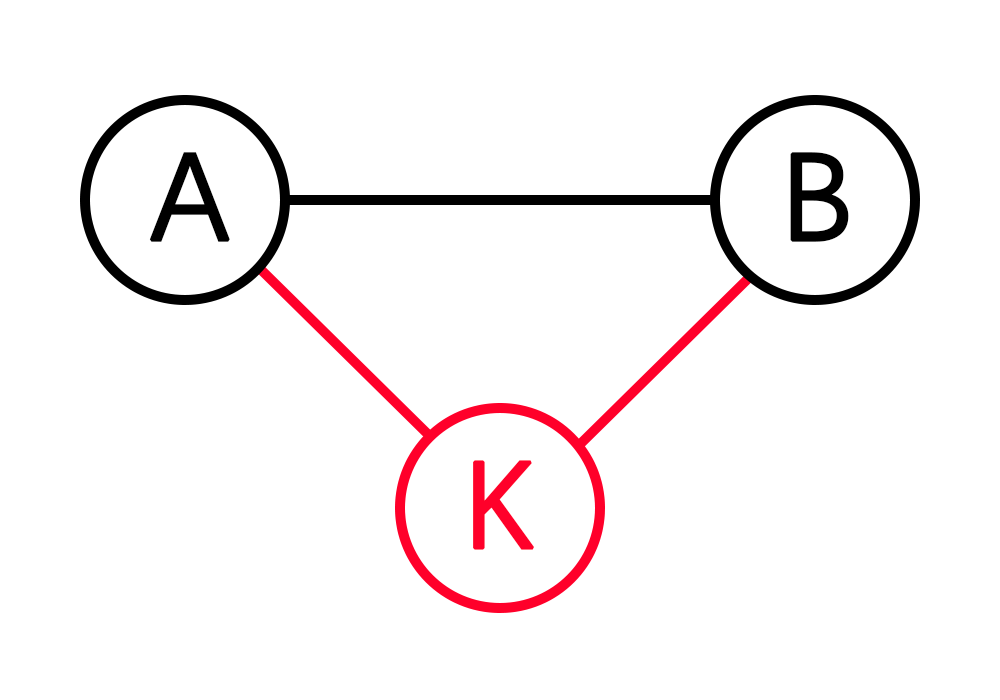
<style>
.page{position:relative;width:1000px;height:700px;background:#ffffff}
.page>*{position:absolute;margin:0}
.t1{font:125px "DengXian";color:#000000;font-weight:bold}
.t2{font:125px "DengXian";color:#ff002a;font-weight:bold}
</style>
<div class="page">
<p class="t1" style="left:149px;top:152px;width:81px;height:90px">A</p>
<p class="t1" style="left:790px;top:152px;width:59px;height:90px">B</p>
<p class="t2" style="left:473px;top:460px;width:62px;height:90px">K</p>
</div>
